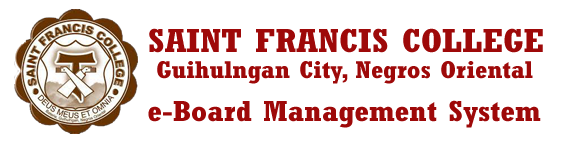
<style>
.page{position:relative;width:570px;height:143px;background:#ffffff}
.page>*{position:absolute;margin:0}
.t1{font:32.8px "Rockwell-CondensedBold";color:#9e0909;scale:1.18 1}
.t2{font:24.1px "Rockwell-CondensedBold";color:#9e0909;scale:1.18 1}
.t3{font:28.4px "Rockwell-CondensedBold";color:#9e0909;scale:1.18 1}
</style>
<div class="page">
<p class="t1" style="left:149px;top:28px;width:394px;height:25px">SAINT FRANCIS COLLEGE</p>
<p class="t2" style="left:157px;top:61px;width:376px;height:23px">Guihulngan City, Negros Oriental</p>
<p class="t3" style="left:148px;top:100px;width:393px;height:28px">e-Board Management System</p>
</div>
